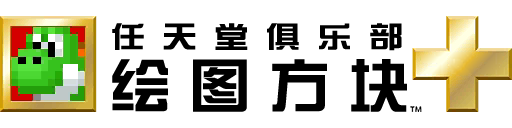
<style>
.page{position:relative;width:512px;height:128px;background:#ffffff}
.page>*{position:absolute;margin:0}
.t1{font:29.4px "DFZongYiW7JF";letter-spacing:0.46em;color:#000000;scale:1.2 1}
.t2{font:58.8px "DFZongYiW7JF";letter-spacing:0.29em;color:#000000;scale:1.05 1}
</style>
<div class="page">
<p class="t1" style="left:112px;top:23px;width:290px;height:28px">任天堂俱乐部</p>
<p class="t2" style="left:112px;top:59px;width:295px;height:53px">绘图方块</p>
</div>
